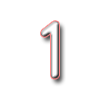
<style>
.page{position:relative;width:100px;height:100px;background:#ffffff}
.page>*{position:absolute;margin:0}
.t1{font:100px "YanoljaYacheR"}
</style>
<div class="page">
<p class="t1" style="left:41px;top:21px;width:18px;height:58px">1</p>
</div>
